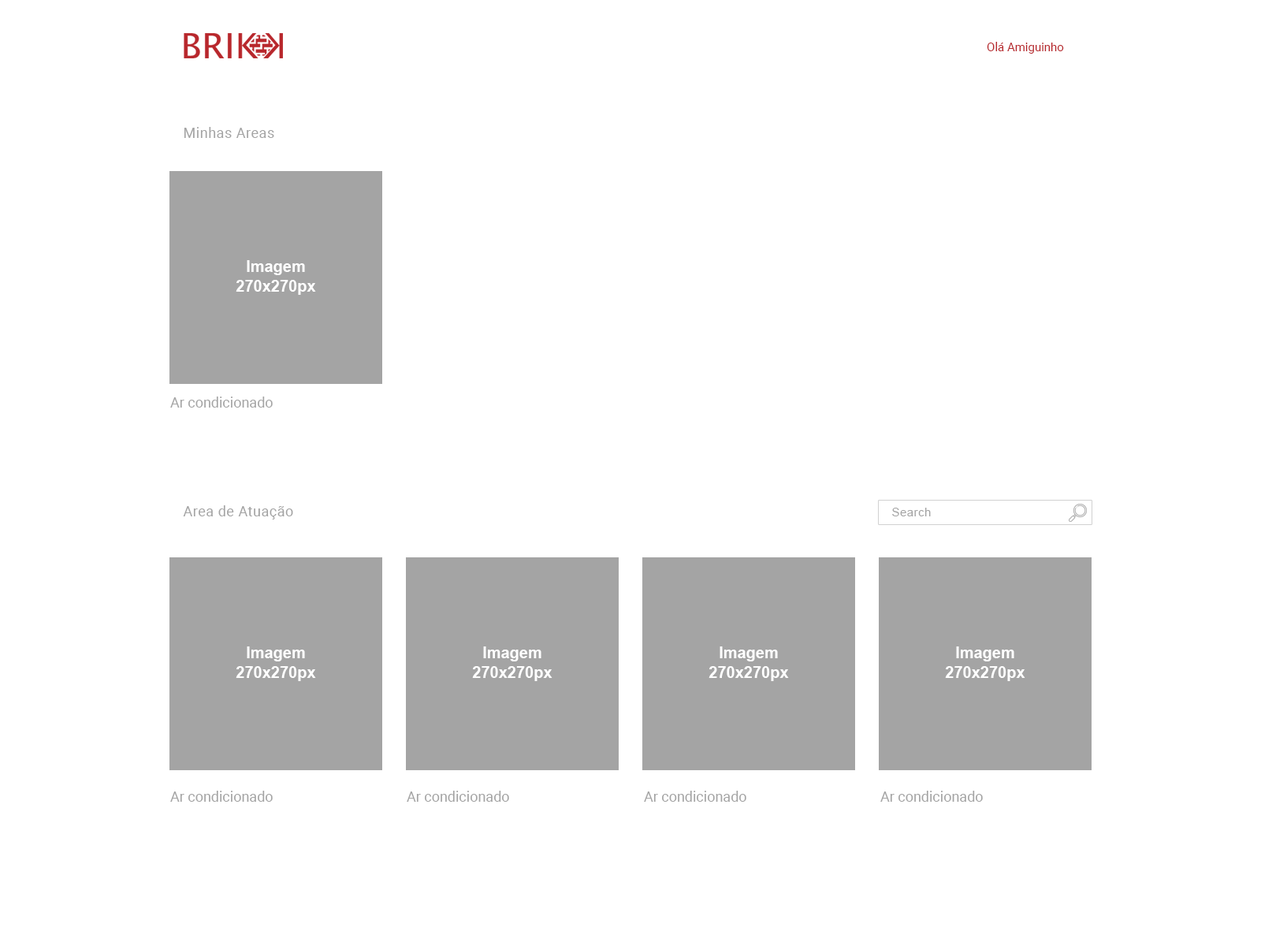
<style>
.page{position:relative;width:1261px;height:946px;background:#ffffff}
.page>*{position:absolute;margin:0}
.t1{font:11.8px "Roboto-Regular";color:#b8272c}
.t2{font:14.2px "Roboto-Regular";letter-spacing:0.03em;color:#a4a4a4}
.t3{font:15.8px/19.7px "Arial-BoldMT";color:#ffffff}
.t4{font:14.2px "Roboto-Regular";color:#a4a4a4}
.t5{font:11.8px "ArialMT";letter-spacing:0.03em;color:#a4a4a4}
</style>
<div class="page">
<p class="t1" style="left:987px;top:42px;width:77px;height:12px">Olá Amiguinho</p>
<p class="t2" style="left:184px;top:127px;width:90px;height:11px">Minhas Areas</p>
<p class="t3" style="left:236px;top:260px;width:80px;height:35px;text-align:center">Imagem<br>270x270px</p>
<p class="t4" style="left:170px;top:396px;width:103px;height:11px">Ar condicionado</p>
<p class="t2" style="left:183px;top:505px;width:110px;height:14px">Area de Atuação</p>
<p class="t5" style="left:892px;top:508px;width:39px;height:8px">Search</p>
<p class="t3" style="left:236px;top:646px;width:80px;height:35px;text-align:center">Imagem<br>270x270px</p>
<p class="t3" style="left:472px;top:646px;width:80px;height:35px;text-align:center">Imagem<br>270x270px</p>
<p class="t3" style="left:708px;top:646px;width:81px;height:35px;text-align:center">Imagem<br>270x270px</p>
<p class="t3" style="left:945px;top:646px;width:80px;height:35px;text-align:center">Imagem<br>270x270px</p>
<p class="t4" style="left:170px;top:790px;width:103px;height:11px">Ar condicionado</p>
<p class="t4" style="left:407px;top:790px;width:102px;height:11px">Ar condicionado</p>
<p class="t4" style="left:644px;top:790px;width:102px;height:11px">Ar condicionado</p>
<p class="t4" style="left:880px;top:790px;width:103px;height:11px">Ar condicionado</p>
</div>
